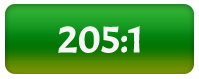
<style>
.page{position:relative;width:199px;height:79px}
.page>*{position:absolute;margin:0}
.t1{font:40px "Acme-Regular";color:#f6f6f6}
</style>
<div class="page">
<p class="t1" style="left:58px;top:26px;width:82px;height:27px">205:1</p>
</div>
